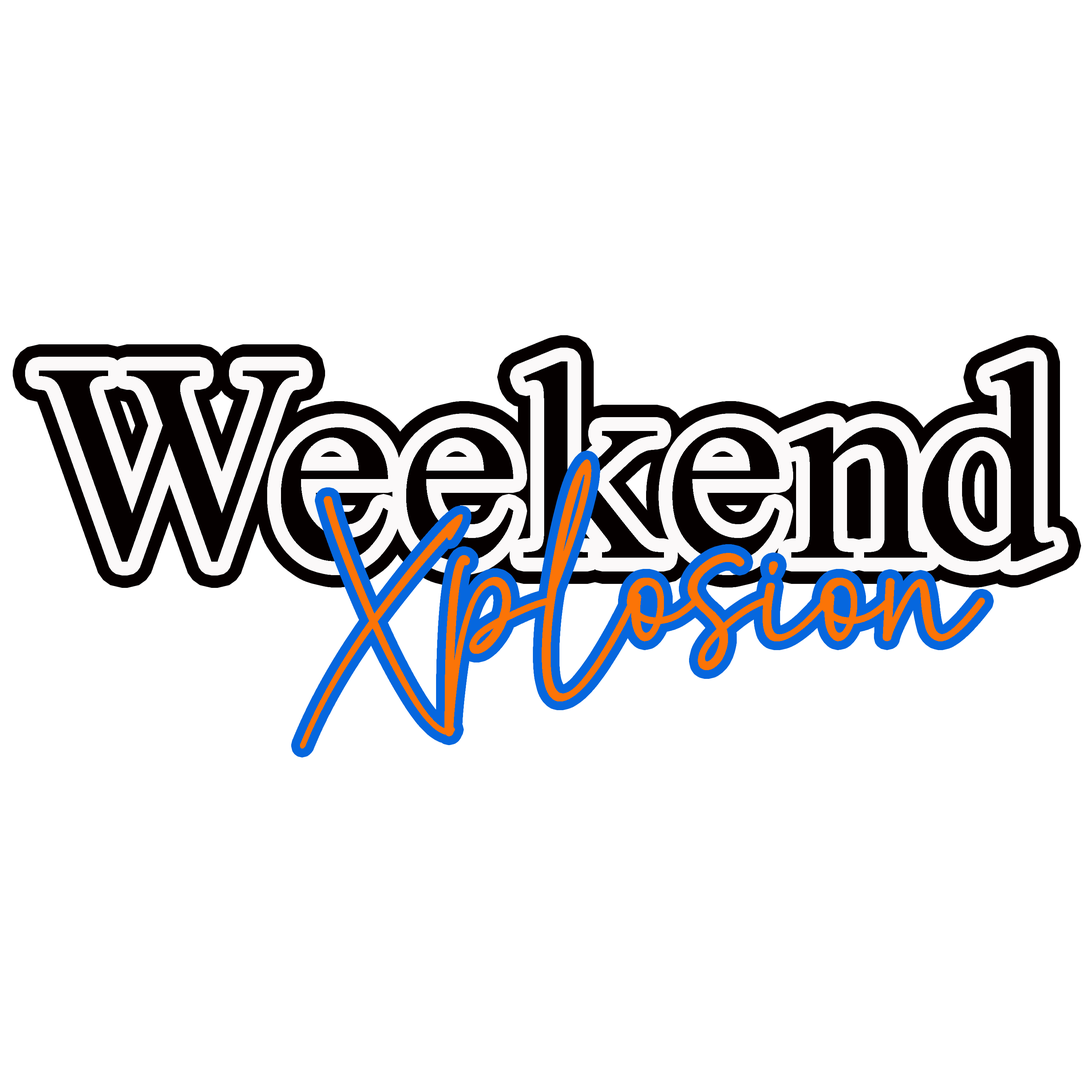
<style>
.page{position:relative;width:1092px;height:1092px;background:#ffffff}
.page>*{position:absolute;margin:0}
.t1{font:281.9px "TimesNewRomanPSMT";color:#030000}
.t2{font:217.9px "AshleySouthineDemo";color:#fb7407}
.t3{font:208.7px "AshleySouthineDemo";color:#fb7407}
</style>
<div class="page">
<p class="t1" style="left:39px;top:361px;width:1016px;height:201px">Weekend</p>
<p class="t2" style="left:444px;top:459px;width:541px;height:277px">plosion</p>
<p class="t3" style="left:300px;top:496px;width:163px;height:253px">X</p>
</div>
